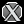
<style>
.page{position:relative;width:24px;height:24px;background:#000000}
.page>*{position:absolute;margin:0}
.t1{font:30px "GurmukhiMN";color:#e0e2e3}
</style>
<div class="page">
<p class="t1" style="left:4px;top:5px;width:17px;height:16px">x</p>
</div>
